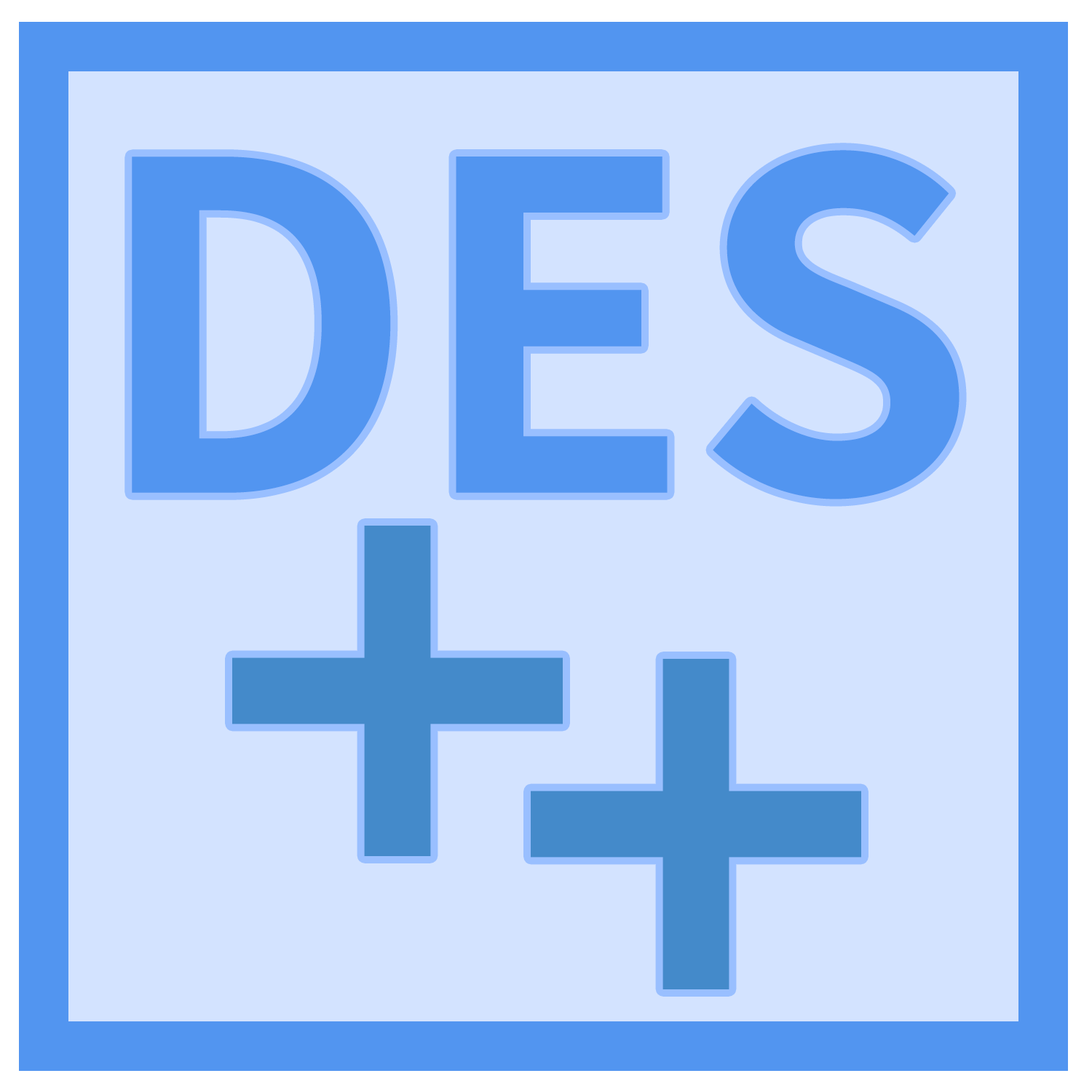
<style>
.page{position:relative;width:1092px;height:1092px;background:#d3e3ff}
.page>*{position:absolute;margin:0}
.t1{font:454.1px "SourceHanSansSC-Bold";color:#5295f0}
</style>
<div class="page">
<p class="t1" style="left:132px;top:150px;width:827px;height:349px">DES</p>
</div>
